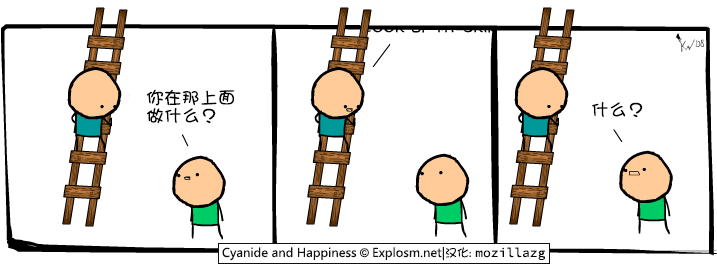
<style>
.page{position:relative;width:717px;height:265px;background:#ffffff}
.page>*{position:absolute;margin:0}
.t1{font:18px/18px "DFGirl";color:#000000}
.t2{font:18px "DFGirl";color:#000000}
</style>
<div class="page">
<p class="t1" style="left:146px;top:89px;width:89px;height:35px">你在那上面<br>做什么？</p>
<p class="t2" style="left:592px;top:101px;width:51px;height:17px">什么？</p>
</div>
